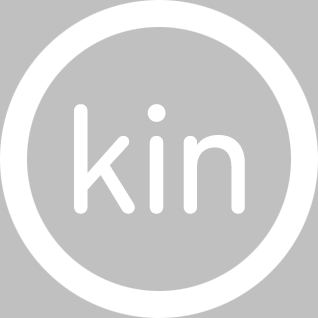
<style>
.page{position:relative;width:318px;height:318px;background:#c0c0c0}
.page>*{position:absolute;margin:0}
.t1{font:158.3px "DINNextRoundedLTPro-Regular";color:#ffffff}
</style>
<div class="page">
<p class="t1" style="left:74px;top:104px;width:171px;height:110px">kin</p>
</div>
